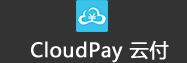
<style>
.page{position:relative;width:187px;height:63px;background:#333333}
.page>*{position:absolute;margin:0}
.t1{font:19.6px "MicrosoftYaHei";color:#ffffff;font-weight:bold}
</style>
<div class="page">
<p class="t1" style="left:31px;top:40px;width:138px;height:23px">CloudPay 云付</p>
</div>
